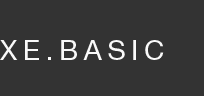
<style>
.page{position:relative;width:204px;height:96px;background:#333333}
.page>*{position:absolute;margin:0}
.t1{font:28px "HelveticaNeue-Roman";letter-spacing:0.2em;color:#fafafa;text-transform:uppercase}
</style>
<div class="page">
<p class="t1" style="left:0px;top:40px;width:164px;height:20px">XE.Basic</p>
</div>
